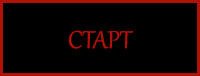
<style>
.page{position:relative;width:200px;height:76px;background:#000000}
.page>*{position:absolute;margin:0}
.t1{font:30px "Gabriola";color:#b01207;text-transform:uppercase}
</style>
<div class="page">
<p class="t1" style="left:68px;top:30px;width:66px;height:19px">старт</p>
</div>
